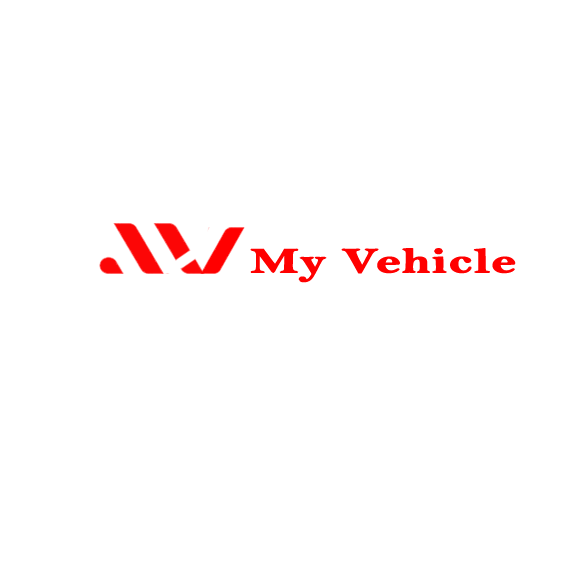
<style>
.page{position:relative;width:564px;height:564px;background:#ffffff}
.page>*{position:absolute;margin:0}
.t1{font:35.6px "BellMTBold";color:#ff0000;font-weight:bold;scale:1.45 1}
.t2{font:35.6px "BellMTBold";color:#ff0000;text-transform:uppercase;font-weight:bold;scale:1.45 1}
</style>
<div class="page">
<p class="t1" style="left:250px;top:248px;width:266px;height:35px"><span class="t2">M</span>y <span class="t2">V</span>ehicle</p>
</div>
